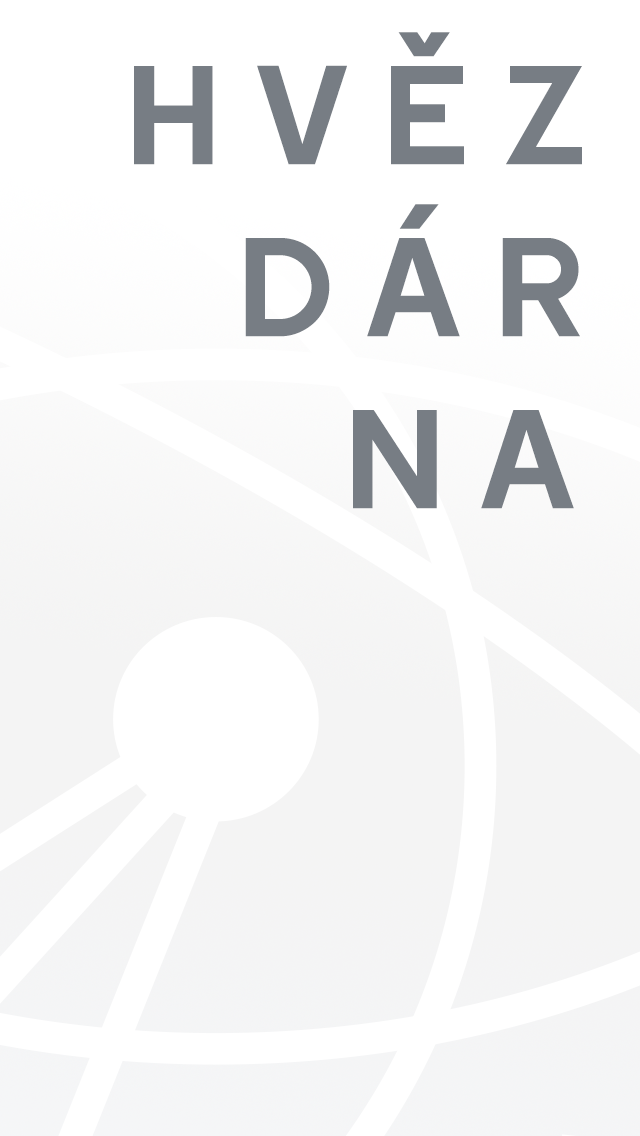
<style>
.page{position:relative;width:640px;height:1136px;background:#ffffff}
.page>*{position:absolute;margin:0}
.t1{font:140px/172px "Gross";letter-spacing:0.24em;color:#777d84}
</style>
<div class="page">
<p class="t1" style="left:134px;top:32px;width:448px;height:477px;text-align:right">HVĚZ<br>DÁR<br>NA</p>
</div>
